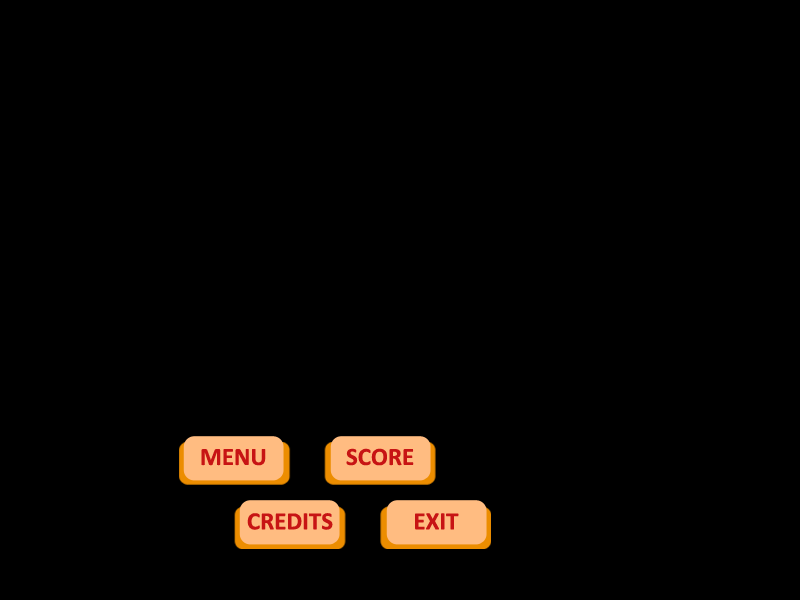
<style>
.page{position:relative;width:800px;height:600px;background:#000000}
.page>*{position:absolute;margin:0}
.t1{font:25px "Calibri-Bold";color:#c71414}
</style>
<div class="page">
<p class="t1" style="left:201px;top:449px;width:65px;height:17px">MENU</p>
<p class="t1" style="left:346px;top:448px;width:68px;height:18px">SCORE</p>
<p class="t1" style="left:247px;top:513px;width:86px;height:17px">CREDITS</p>
<p class="t1" style="left:415px;top:513px;width:44px;height:17px">EXIT</p>
</div>
